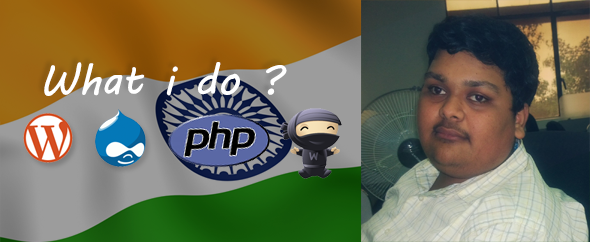
<style>
.page{position:relative;width:590px;height:242px}
.page>*{position:absolute;margin:0}
.t1{font:41.7px "MVBoli";color:#ffffff}
</style>
<div class="page">
<p class="t1" style="left:44px;top:62px;width:243px;height:34px">What i do ?</p>
</div>
